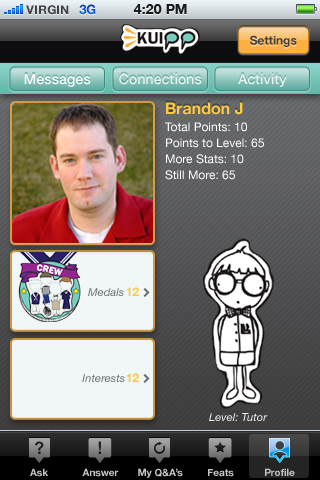
<style>
.page{position:relative;width:320px;height:480px}
.page>*{position:absolute;margin:0}
.t1{font:12px "HelveticaNeue-Bold";color:#404040;text-transform:uppercase}
.t2{font:13px "HelveticaNeue-Bold";color:#0c54c5;text-transform:uppercase}
.t3{font:14px "HelveticaNeue-Bold";color:#1a1b1b;text-transform:uppercase}
.t4{font:12px "HelveticaNeue-Bold";color:#404041}
.t5{font:14px "HelveticaNeue-Medium";letter-spacing:0.01em;color:#ffffff}
.t6{font:14px "HelveticaNeue-Medium";letter-spacing:0.01em;color:#e9f4f3}
.t7{font:16px "HelveticaNeue-Bold";color:#fcc940}
.t8{font:12px/16px "HelveticaNeue";color:#ffffff}
.t9{font:11px "HelveticaNeue-Italic";letter-spacing:0.01em;color:#6d6e71}
.t10{font:12px "HelveticaNeue-Bold";color:#fcc940}
.t11{font:11px "HelveticaNeue-Italic";letter-spacing:0.01em;color:#f6f0f0}
.t12{font:10px "HelveticaNeue-Bold";color:#c6c6c5}
</style>
<div class="page">
<p class="t1" style="left:26px;top:5px;width:43px;height:10px">VIRGIN</p>
<p class="t2" style="left:79px;top:4px;width:17px;height:11px">3G</p>
<p class="t3" style="left:133px;top:4px;width:54px;height:10px">4:20 PM</p>
<p class="t4" style="left:250px;top:35px;width:47px;height:12px">Settings</p>
<p class="t5" style="left:24px;top:74px;width:67px;height:13px">Messages</p>
<p class="t6" style="left:119px;top:73px;width:83px;height:12px">Connections</p>
<p class="t6" style="left:238px;top:74px;width:49px;height:13px">Activity</p>
<p class="t7" style="left:166px;top:102px;width:77px;height:13px">Brandon J</p>
<p class="t8" style="left:165px;top:122px;width:99px;height:58px">Total Points: 10<br>Points to Level: 65<br>More Stats: 10<br>Still More: 65</p>
<p class="t9" style="left:88px;top:288px;width:36px;height:8px">Medals</p>
<p class="t10" style="left:126px;top:287px;width:13px;height:9px">12</p>
<p class="t9" style="left:82px;top:374px;width:43px;height:8px">Interests</p>
<p class="t10" style="left:126px;top:373px;width:13px;height:9px">12</p>
<p class="t11" style="left:209px;top:413px;width:59px;height:8px">Level: Tutor</p>
<p class="t12" style="left:30px;top:468px;width:19px;height:9px">Ask</p>
<p class="t12" style="left:82px;top:468px;width:37px;height:9px">Answer</p>
<p class="t12" style="left:138px;top:468px;width:45px;height:10px">My Q&amp;A’s</p>
<p class="t12" style="left:208px;top:469px;width:26px;height:8px">Feats</p>
<p class="t12" style="left:265px;top:468px;width:30px;height:8px">Profile</p>
</div>
